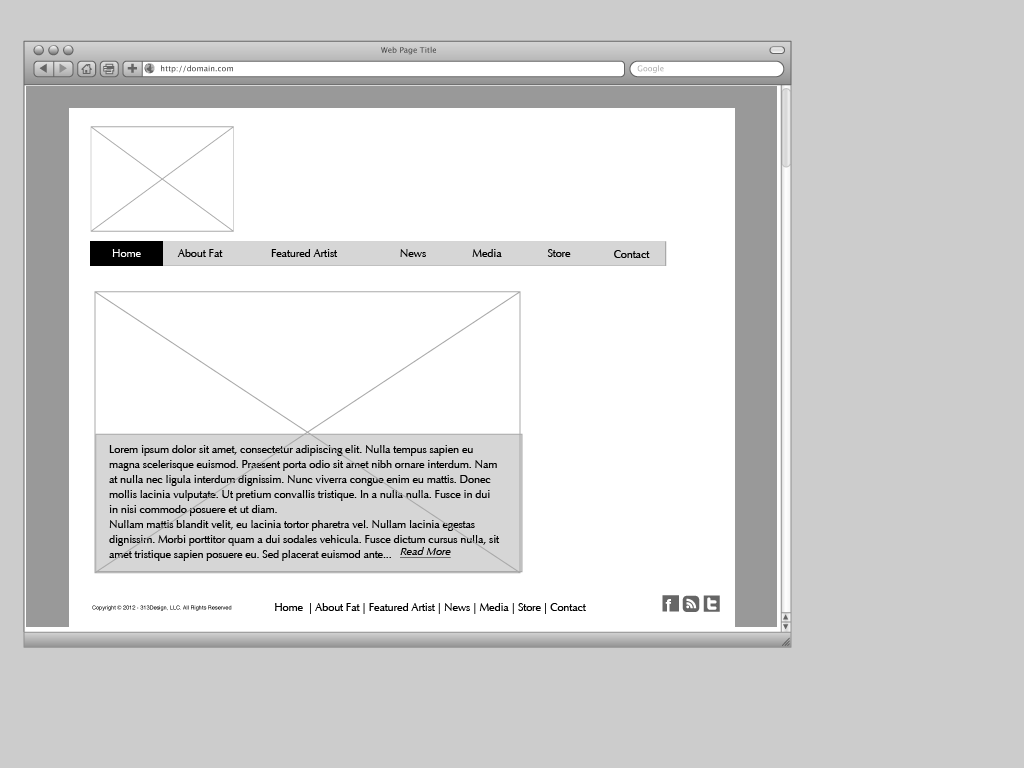
<style>
.page{position:relative;width:1024px;height:768px;background:#cccccc}
.page>*{position:absolute;margin:0}
.t1{font:11px "Optima-Regular";letter-spacing:-0.015em;color:#ffffff}
.t2{font:11px "Optima-Regular";letter-spacing:-0.015em;color:#000000}
.t3{font:11px/15px "Optima-Regular";letter-spacing:-0.015em;color:#000000}
.t4{font:11px "Optima-Italic";letter-spacing:-0.015em;color:#000000;text-decoration:underline}
</style>
<div class="page">
<p class="t1" style="left:112px;top:249px;width:29px;height:8px">Home</p>
<p class="t2" style="left:177px;top:249px;width:46px;height:8px">About Fat</p>
<p class="t2" style="left:271px;top:249px;width:67px;height:8px">Featured Artist</p>
<p class="t2" style="left:400px;top:249px;width:26px;height:8px">News</p>
<p class="t2" style="left:472px;top:249px;width:30px;height:8px">Media</p>
<p class="t2" style="left:547px;top:249px;width:24px;height:8px">Store</p>
<p class="t2" style="left:614px;top:250px;width:36px;height:8px">Contact</p>
<p class="t3" style="left:109px;top:445px;width:391px;height:116px">Lorem ipsum dolor sit amet, consectetur adipiscing elit. Nulla tempus sapien eu magna scelerisque euismod. Praesent porta odio sit amet nibh ornare interdum. Nam at nulla nec ligula interdum dignissim. Nunc viverra congue enim eu mattis. Donec mollis lacinia vulputate. Ut pretium convallis tristique. In a nulla nulla. Fusce in dui in nisi commodo posuere et ut diam.<br>Nullam mattis blandit velit, eu lacinia tortor pharetra vel. Nullam lacinia egestas dignissim. Morbi porttitor quam a dui sodales vehicula. Fusce dictum cursus nulla, sit amet tristique sapien posuere eu. Sed placerat euismod ante...</p>
<p class="t4" style="left:400px;top:547px;width:51px;height:11px">Read More</p>
<p class="t2" style="left:275px;top:603px;width:311px;height:11px">Home  | About Fat | Featured Artist | News | Media | Store | Contact</p>
</div>
